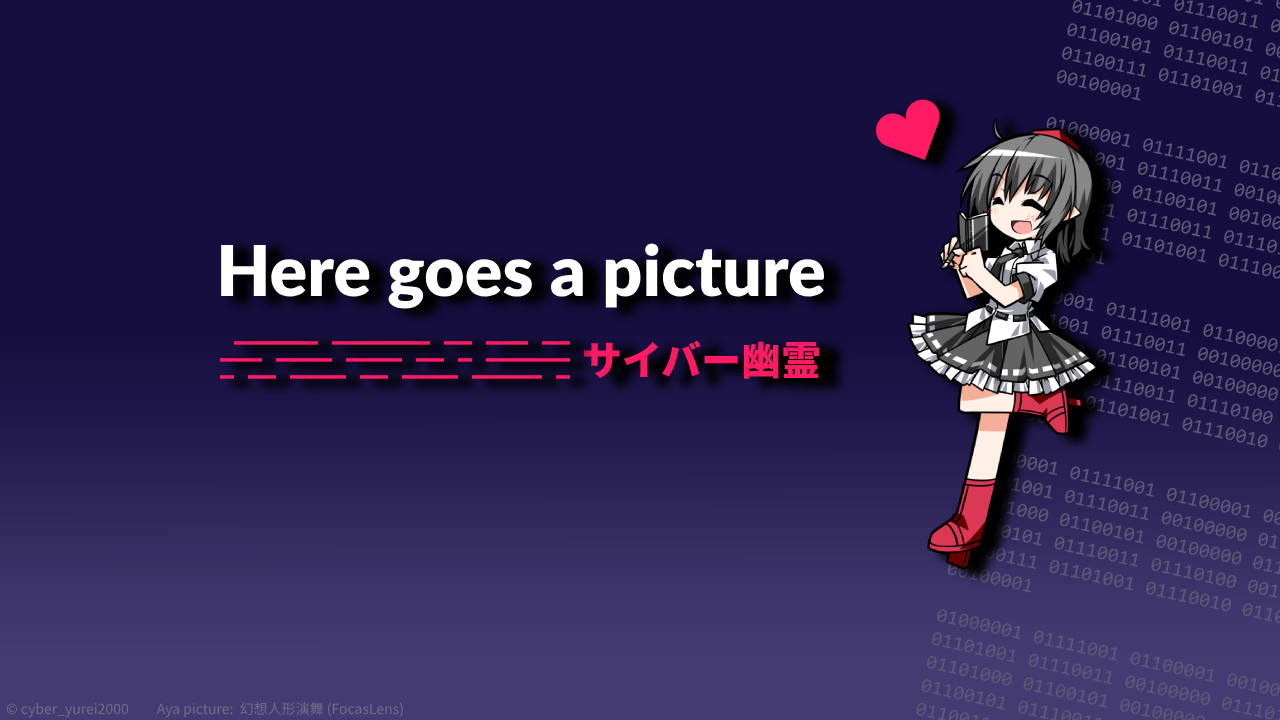
<style>
.page{position:relative;width:1280px;height:720px;background:#150e3e}
.page>*{position:absolute;margin:0}
.t1{font:70px "Lato-Black";color:#ffffff}
.t2{font:14px "NotoSansJP-Black";color:#ff1b64}
.t3{font:40px "NotoSansJP-Black";color:#ff1b64}
.t4{font:14px "NotoSansJP-Regular";color:#726e86}
</style>
<div class="page">
<p class="t1" style="left:221px;top:243px;width:604px;height:66px">Here goes a picture</p>
<p class="t2" style="left:220px;top:341px;width:350px;height:38px">▂▂▂▂▂▂　▂▂▂▂▂▂▂　▂▂　▂▂▂　▂▂<br>▂▂▂　▂▂▂▂　▂▂▂▂　▂▂　▂　▂▂▂▂▂▂<br>▂　▂▂　▂▂▂▂　▂▂　▂▂▂▂　▂▂▂▂▂　▂</p>
<p class="t3" style="left:583px;top:340px;width:236px;height:39px">サイバー幽霊</p>
<p class="t4" style="left:6px;top:702px;width:397px;height:16px">© cyber_yurei2000　　Aya picture:  幻想人形演舞 (FocasLens)</p>
</div>
